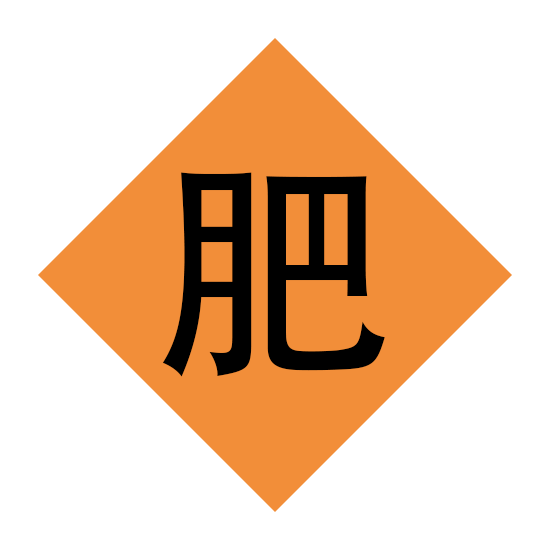
<style>
.page{position:relative;width:550px;height:550px;background:#ffffff}
.page>*{position:absolute;margin:0}
.t1{font:240px "AdobeHeitiStd-Regular";color:#000000}
</style>
<div class="page">
<p class="t1" style="left:162px;top:172px;width:223px;height:205px">肥</p>
</div>
